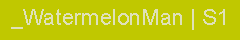
<style>
.page{position:relative;width:240px;height:40px;background:#c0c800}
.page>*{position:absolute;margin:0}
.t1{font:22px "ArialMT";color:#dfe1b8}
</style>
<div class="page">
<p class="t1" style="left:11px;top:9px;width:214px;height:21px">WatermelonMan | S1_</p>
</div>
